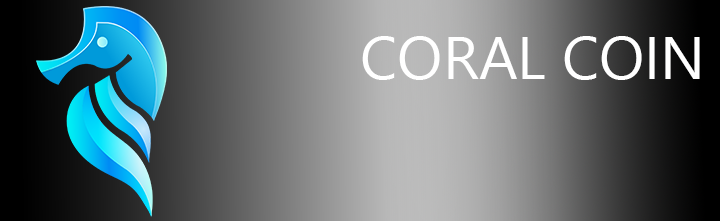
<style>
.page{position:relative;width:720px;height:221px}
.page>*{position:absolute;margin:0}
.t1{font:60px "YuGothicUI-Regular";color:#ffffff}
</style>
<div class="page">
<p class="t1" style="left:362px;top:36px;width:338px;height:44px">CORAL COIN</p>
</div>
